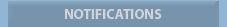
<style>
.page{position:relative;width:227px;height:27px;background:#7894ad}
.page>*{position:absolute;margin:0}
.t1{font:14px "MyriadPro-Bold";color:#e0dddd}
</style>
<div class="page">
<p class="t1" style="left:65px;top:9px;width:97px;height:10px;opacity:0.86">NOTIFICATIONS</p>
</div>
